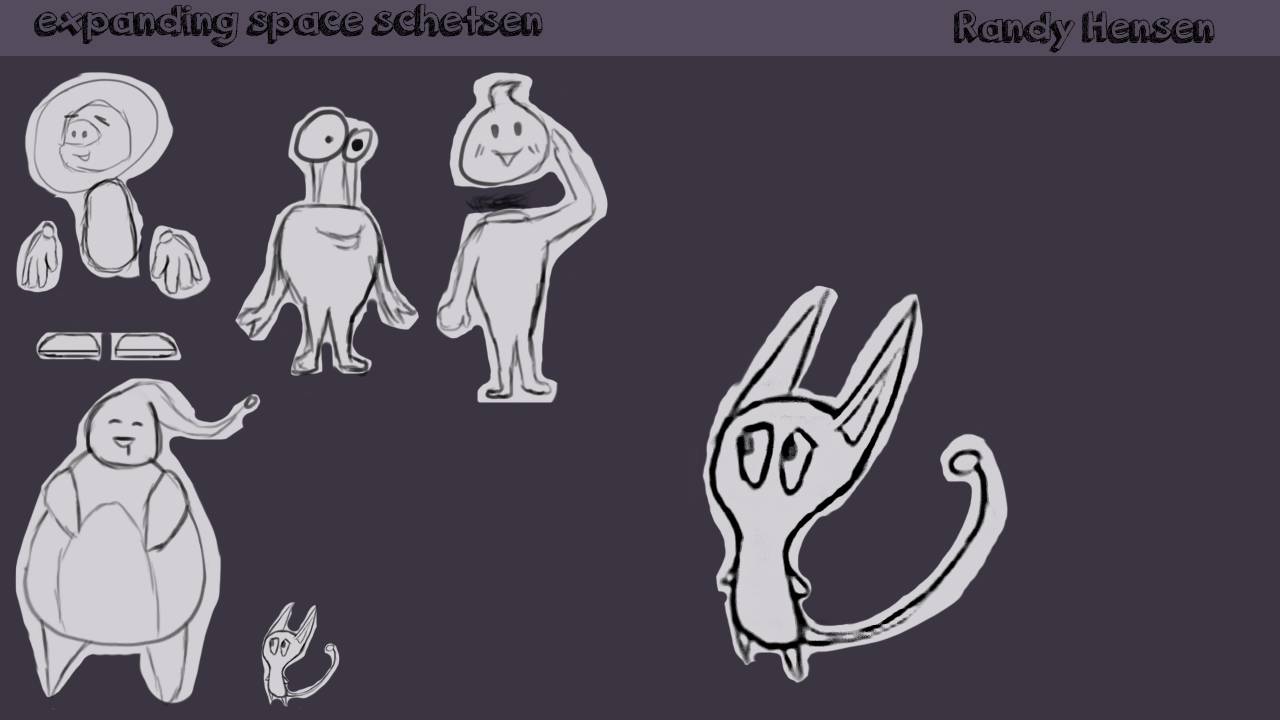
<style>
.page{position:relative;width:1280px;height:720px;background:#3b3542}
.page>*{position:absolute;margin:0}
.t1{font:45.8px "orangejuice";color:#000000}
</style>
<div class="page">
<p class="t1" style="left:34px;top:4px;width:509px;height:44px">expanding space schetsen</p>
<p class="t1" style="left:953px;top:9px;width:262px;height:44px">Randy Hensen</p>
</div>
